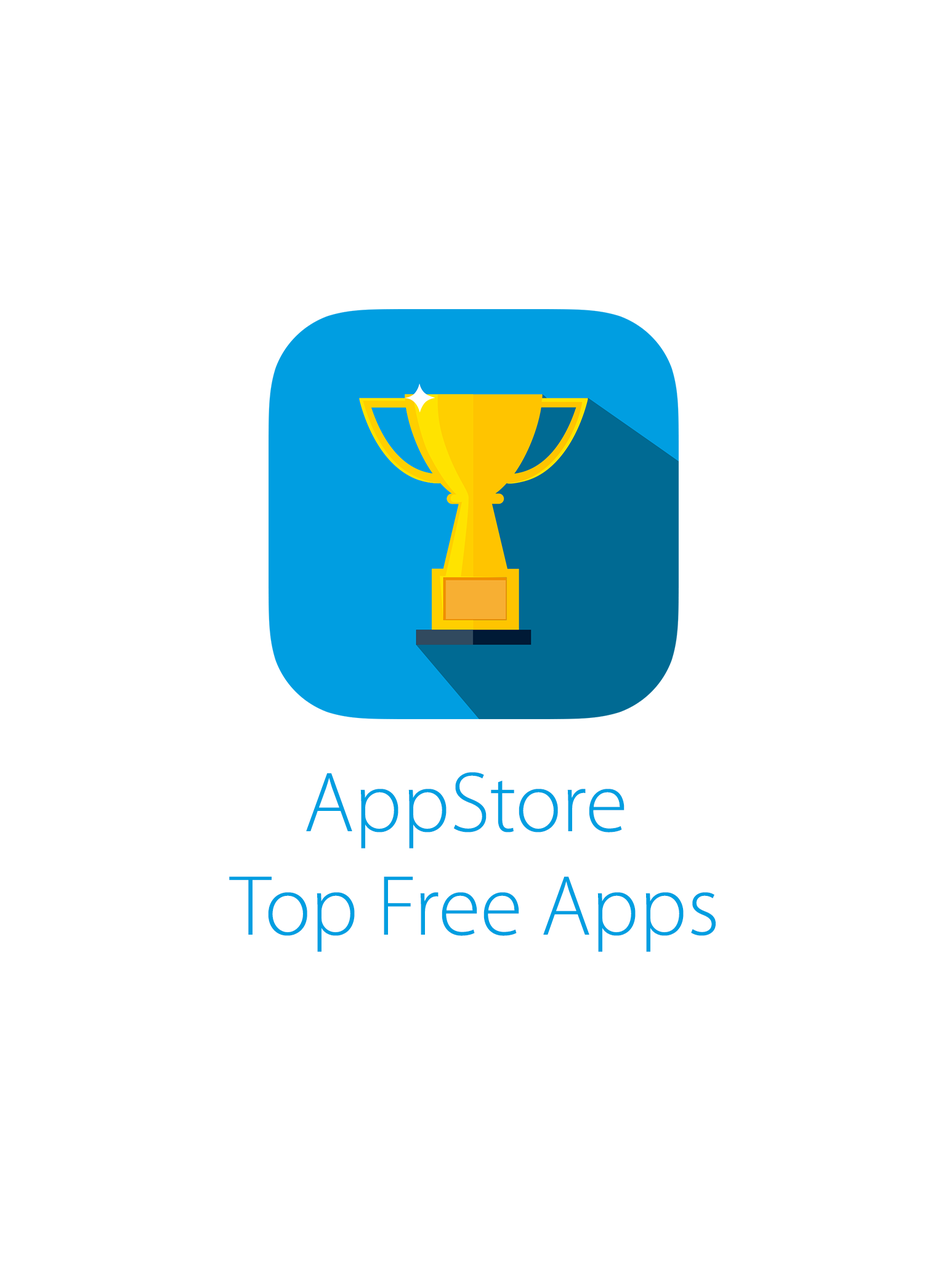
<style>
.page{position:relative;width:946px;height:1261px;background:#ffffff}
.page>*{position:absolute;margin:0}
.t1{font:86.2px "MyriadPro-Light";color:#009ee1}
</style>
<div class="page">
<p class="t1" style="left:229px;top:772px;width:486px;height:180px;text-align:center">AppStore <br>Top Free Apps</p>
</div>
